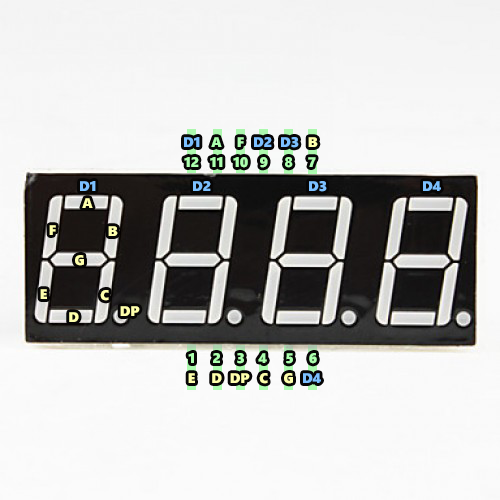
<style>
.page{position:relative;width:500px;height:500px}
.page>*{position:absolute;margin:0}
.t1{font:14px "SegoeUIBlack";color:#7cc0ff}
.t2{font:14px "SegoeUIBlack";color:#acffae}
.t3{font:14px "SegoeUIBlack";color:#feffac}
</style>
<div class="page">
<p class="t1" style="left:184px;top:137px;width:16px;height:10px">D1</p>
<p class="t2" style="left:211px;top:137px;width:11px;height:10px">A</p>
<p class="t2" style="left:237px;top:137px;width:7px;height:10px">F</p>
<p class="t1" style="left:254px;top:137px;width:18px;height:10px">D2</p>
<p class="t1" style="left:281px;top:137px;width:18px;height:11px">D3</p>
<p class="t3" style="left:308px;top:137px;width:10px;height:10px">B</p>
<p class="t2" style="left:184px;top:157px;width:15px;height:10px">12</p>
<p class="t2" style="left:210px;top:157px;width:13px;height:10px">11</p>
<p class="t2" style="left:233px;top:157px;width:15px;height:11px">10</p>
<p class="t2" style="left:260px;top:157px;width:8px;height:11px">9</p>
<p class="t2" style="left:285px;top:157px;width:8px;height:11px">8</p>
<p class="t2" style="left:308px;top:157px;width:8px;height:10px">7</p>
<p class="t1" style="left:80px;top:181px;width:16px;height:10px">D1</p>
<p class="t1" style="left:193px;top:181px;width:18px;height:10px">D2</p>
<p class="t1" style="left:309px;top:181px;width:18px;height:11px">D3</p>
<p class="t1" style="left:423px;top:181px;width:18px;height:10px">D4</p>
<p class="t3" style="left:82px;top:198px;width:11px;height:10px">A</p>
<p class="t3" style="left:49px;top:225px;width:7px;height:10px">F</p>
<p class="t3" style="left:108px;top:226px;width:10px;height:10px">B</p>
<p class="t3" style="left:75px;top:255px;width:9px;height:11px">G</p>
<p class="t3" style="left:40px;top:289px;width:7px;height:10px">E</p>
<p class="t3" style="left:100px;top:290px;width:9px;height:11px">C</p>
<p class="t3" style="left:69px;top:312px;width:10px;height:10px">D</p>
<p class="t3" style="left:120px;top:306px;width:20px;height:10px">DP</p>
<p class="t2" style="left:188px;top:353px;width:6px;height:10px">1</p>
<p class="t2" style="left:213px;top:353px;width:7px;height:10px">2</p>
<p class="t2" style="left:237px;top:353px;width:7px;height:11px">3</p>
<p class="t2" style="left:258px;top:353px;width:9px;height:10px">4</p>
<p class="t2" style="left:286px;top:353px;width:7px;height:11px">5</p>
<p class="t2" style="left:309px;top:353px;width:8px;height:11px">6</p>
<p class="t3" style="left:188px;top:373px;width:7px;height:10px">E</p>
<p class="t3" style="left:212px;top:373px;width:10px;height:10px">D</p>
<p class="t3" style="left:230px;top:373px;width:20px;height:10px">DP</p>
<p class="t3" style="left:259px;top:373px;width:9px;height:11px">C</p>
<p class="t3" style="left:284px;top:373px;width:9px;height:11px">G</p>
<p class="t1" style="left:303px;top:373px;width:18px;height:10px">D4</p>
</div>
